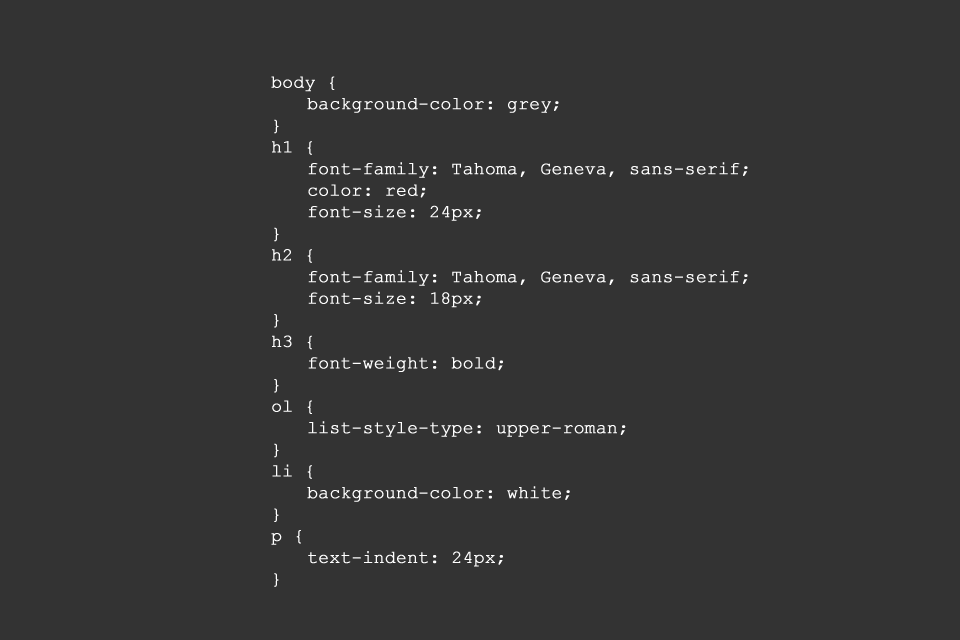
<style>
.page{position:relative;width:960px;height:640px;background:#333333}
.page>*{position:absolute;margin:0}
.t1{font:18px "CourierNewPSMT";letter-spacing:-0.01em;color:#ffffff;font-weight:bold}
</style>
<div class="page">
<p class="t1" style="left:271px;top:76px;width:477px;height:511px">body {<br> background-color: grey;<br>}<br>h1 {<br> font-family: Tahoma, Geneva, sans-serif;<br> color: red;<br> font-size: 24px;<br>}<br>h2 {<br> font-family: Tahoma, Geneva, sans-serif;<br> font-size: 18px;<br>}<br>h3 {<br> font-weight: bold;<br>}<br>ol {<br> list-style-type: upper-roman;<br>}<br>li {<br> background-color: white;<br>}<br>p {<br> text-indent: 24px;<br>}</p>
</div>
